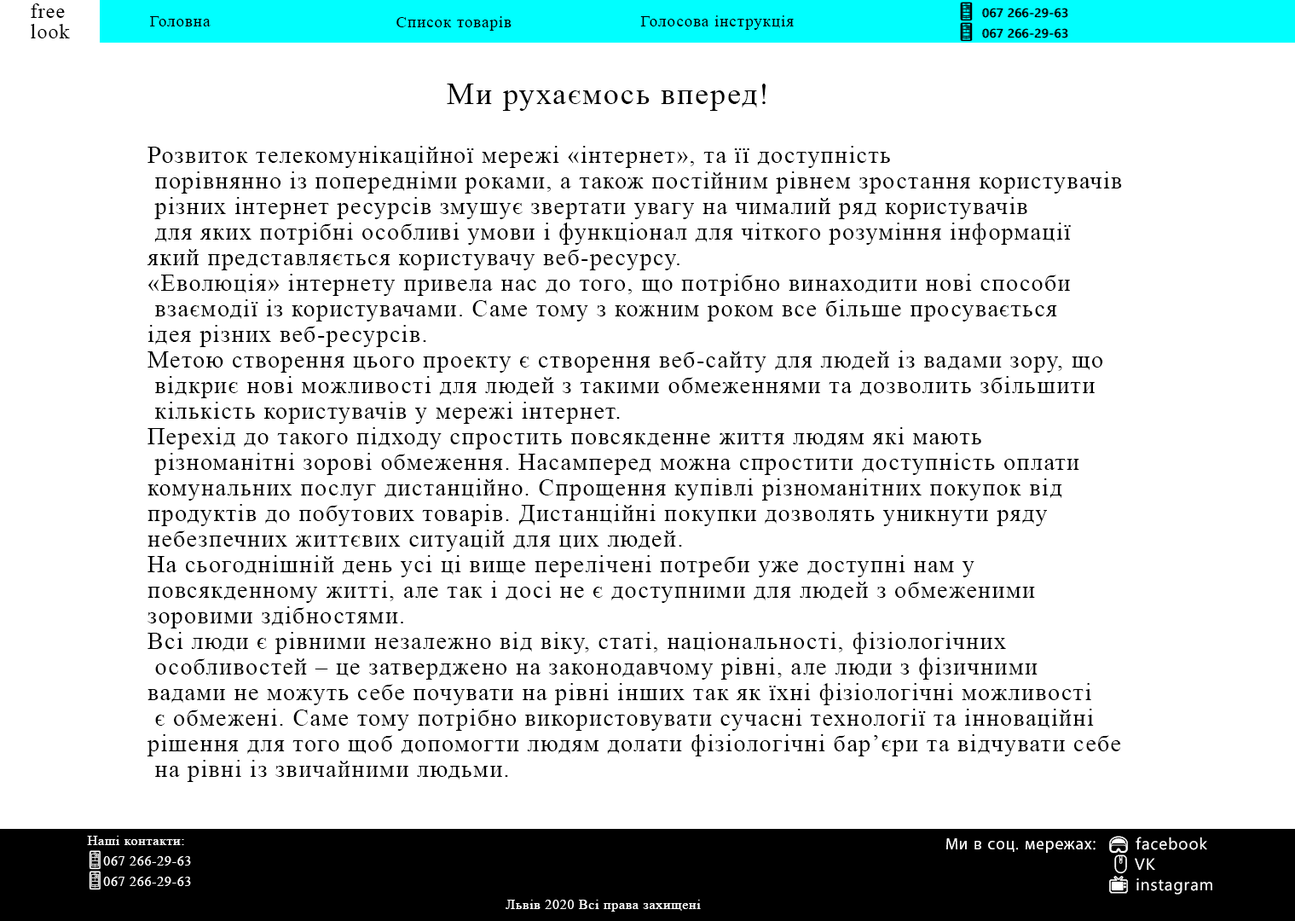
<style>
.page{position:relative;width:1295px;height:921px;background:#ffffff}
.page>*{position:absolute;margin:0}
.t1{font:20.2px/20.2px "TimesNewRomanPSMT";letter-spacing:0.05em;color:#000000}
.t2{font:16.2px "TimesNewRomanPSMT";letter-spacing:0.05em;color:#000000}
.t3{font:30.7px "TimesNewRomanPSMT";letter-spacing:0.05em;color:#000000}
.t4{font:23.9px/25.6px "TimesNewRomanPSMT";letter-spacing:0.05em;color:#000000}
.t5{font:13.5px/20.2px "TimesNewRomanPSMT";letter-spacing:0.05em;color:#ffffff}
.t6{font:16.2px/20.2px "SegoeUIEmoji";letter-spacing:0.05em;color:#ffffff}
.t7{font:13.5px "TimesNewRomanPSMT";letter-spacing:0.05em;color:#ffffff}
</style>
<div class="page">
<p class="t1" style="left:31px;top:3px;width:39px;height:35px">free<br>look</p>
<p class="t2" style="left:150px;top:16px;width:61px;height:10px">Головна</p>
<p class="t2" style="left:396px;top:16px;width:116px;height:15px">Список товарів</p>
<p class="t2" style="left:640px;top:15px;width:154px;height:15px">Голосова інструкція</p>
<p class="t3" style="left:447px;top:84px;width:319px;height:27px">Ми рухаємось вперед!</p>
<p class="t4" style="left:147px;top:146px;width:975px;height:636px">Розвиток телекомунікаційної мережі «інтернет», та її доступність<br> порівнянно із попередніми роками, а також постійним рівнем зростання користувачів<br> різних інтернет ресурсів змушує звертати увагу на чималий ряд користувачів<br> для яких потрібні особливі умови і функціонал для чіткого розуміння інформації <br>який представляється користувачу веб-ресурсу.<br>«Еволюція» інтернету привела нас до того, що потрібно винаходити нові способи<br> взаємодії із користувачами. Саме тому з кожним роком все більше просувається <br>ідея різних веб-ресурсів.<br>Метою створення цього проекту є створення веб-сайту для людей із вадами зору, що<br> відкриє нові можливості для людей з такими обмеженнями та дозволить збільшити<br> кількість користувачів у мережі інтернет.<br>Перехід до такого підходу спростить повсякденне життя людям які мають<br> різноманітні зорові обмеження. Насамперед можна спростити доступність оплати <br>комунальних послуг дистанційно. Спрощення купівлі різноманітних покупок від <br>продуктів до побутових товарів. Дистанційні покупки дозволять уникнути ряду <br>небезпечних життєвих ситуацій для цих людей.<br>На сьогоднішній день усі ці вище перелічені потреби уже доступні нам у <br>повсякденному житті, але так і досі не є доступними для людей з обмеженими <br>зоровими здібностями.<br>Всі люди є рівними незалежно від віку, статі, національності, фізіологічних<br> особливостей – це затверджено на законодавчому рівні, але люди з фізичними <br>вадами не можуть себе почувати на рівні інших так як їхні фізіологічні можливості<br> є обмежені. Саме тому потрібно використовувати сучасні технології та інноваційні <br>рішення для того щоб допомогти людям долати фізіологічні бар’єри та відчувати себе<br> на рівні із звичайними людьми.</p>
<p class="t5" style="left:87px;top:836px;width:104px;height:54px">Наші контакти:<br><span class="t6">📱</span>067 266-29-63<br><span class="t6">📱</span>067 266-29-63</p>
<p class="t7" style="left:506px;top:899px;width:195px;height:12px">Львів 2020 Всі права захищені</p>
</div>
